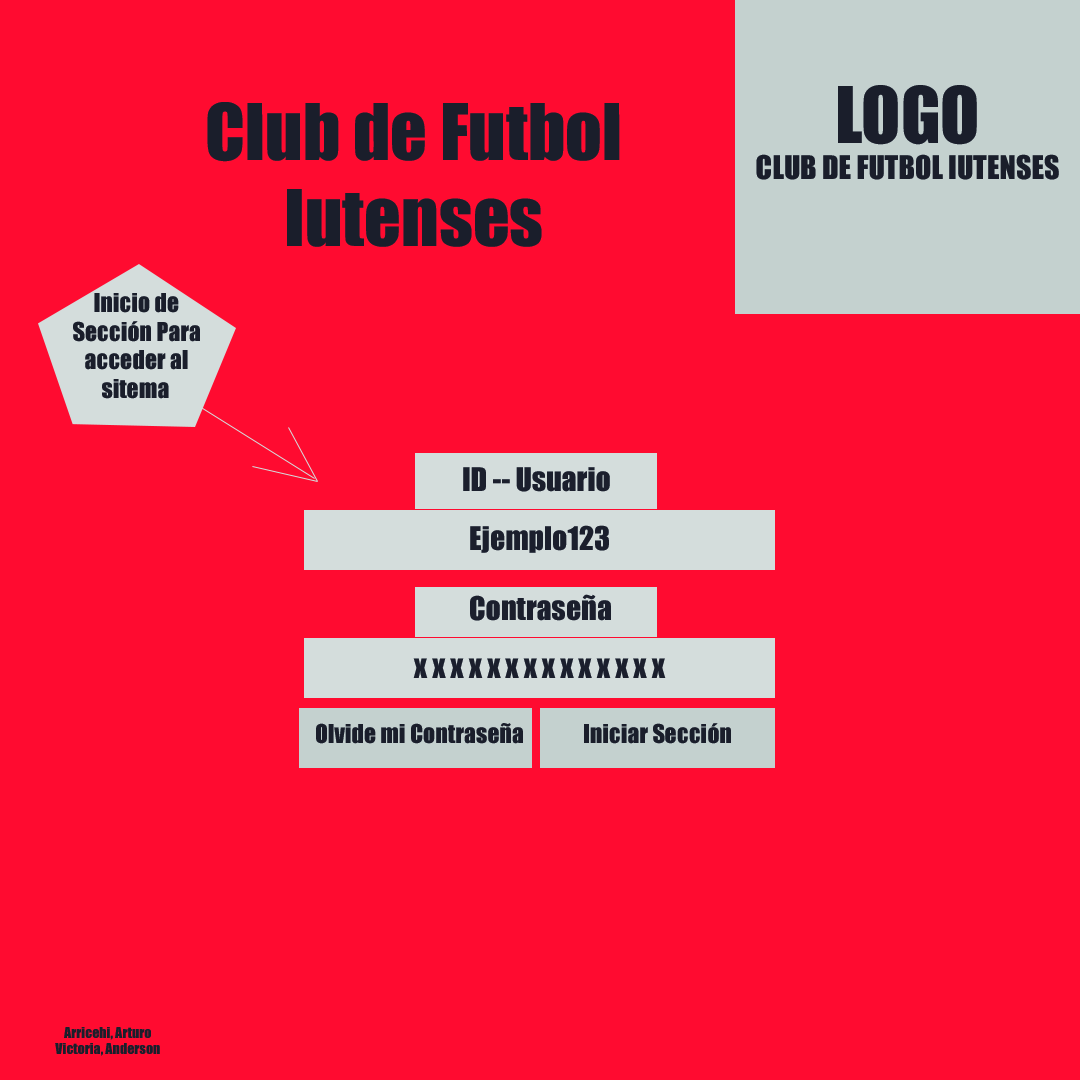
<style>
.page{position:relative;width:1080px;height:1080px;background:#ff0b30}
.page>*{position:absolute;margin:0}
.t1{font:30px "Impact";color:#1a1e2b}
.t2{font:72px "Impact";color:#1a1e2b}
.t3{font:24px "Impact";color:#1a1e2b}
.t4{font:30px "Impact";color:#1b1f2d}
.t5{font:14px "Impact";color:#1a1e2b}
</style>
<div class="page">
<p class="t1" style="left:756px;top:85px;width:303px;height:95px;text-align:center"><span class="t2"><br>LOGO<br></span>CLUB DE FUTBOL IUTENSES</p>
<p class="t2" style="left:207px;top:102px;width:413px;height:145px;text-align:center">Club de Futbol Iutenses</p>
<p class="t3" style="left:73px;top:293px;width:127px;height:106px;text-align:center">Inicio de Sección Para <br>acceder al sitema</p>
<p class="t4" style="left:463px;top:467px;width:147px;height:25px">ID -- Usuario</p>
<p class="t4" style="left:470px;top:525px;width:139px;height:28px">Ejemplo123</p>
<p class="t4" style="left:470px;top:594px;width:141px;height:27px">Contraseña</p>
<p class="t4" style="left:413px;top:658px;width:253px;height:20px">x x x x x x x x x x x x x x</p>
<p class="t3" style="left:316px;top:723px;width:207px;height:21px">Olvide mi Contraseña</p>
<p class="t3" style="left:584px;top:723px;width:147px;height:21px">Iniciar Sección</p>
<p class="t5" style="left:55px;top:1027px;width:105px;height:29px;text-align:center">Arricehi, Arturo<br>Victoria, Anderson</p>
</div>
